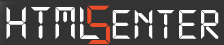
<style>
.page{position:relative;width:224px;height:45px;background:#333333}
.page>*{position:absolute;margin:0}
.t1{font:50px "DS-Digital";color:#fdfcfc}
.t2{font:60px "DS-Digital";color:#e74d29}
</style>
<div class="page">
<p class="t1" style="left:6px;top:6px;width:94px;height:33px">HTML</p>
<p class="t2" style="left:87px;top:5px;width:23px;height:39px">5</p>
</div>
